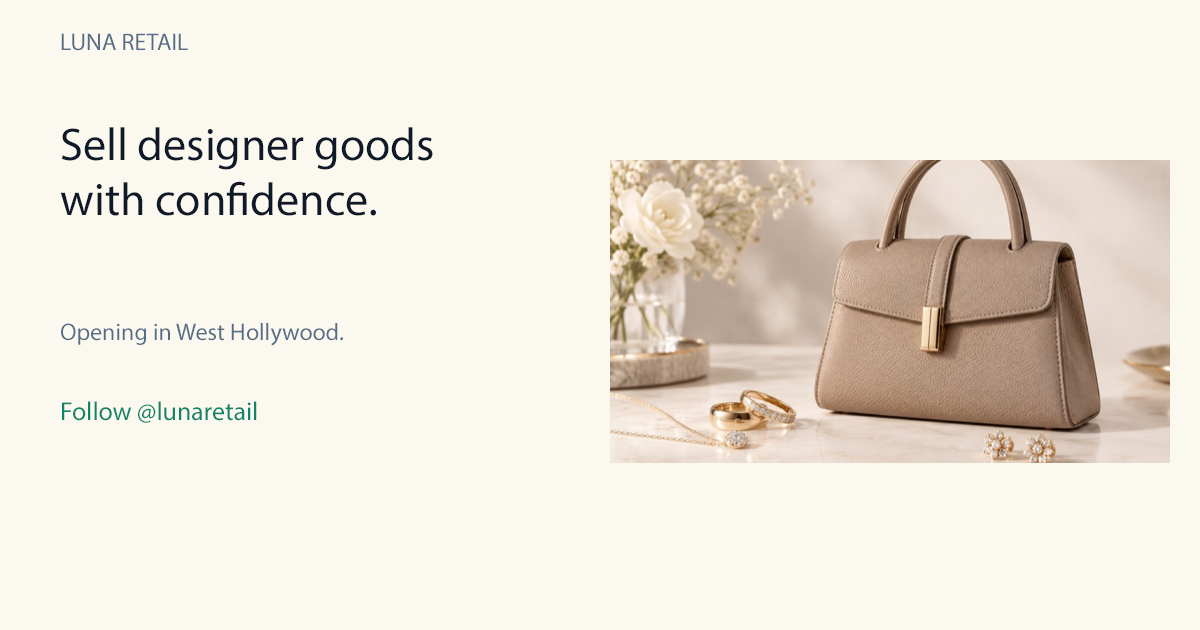
<style>
.page{position:relative;width:1200px;height:630px;background:#fbf8ef}
.page>*{position:absolute;margin:0}
.t1{font:24px "MyriadPro-Regular";color:#566d85}
.t2{font:46px "MyriadPro-Regular";color:#0f1928}
.t3{font:26px "MyriadPro-Regular";color:#0f8469}
</style>
<div class="page">
<p class="t1" style="left:61px;top:33px;width:127px;height:18px">LUNA RETAIL</p>
<p class="t2" style="left:60px;top:127px;width:373px;height:89px">Sell designer goods<br>with confidence.</p>
<p class="t1" style="left:61px;top:323px;width:282px;height:23px">Opening in West Hollywood.</p>
<p class="t3" style="left:62px;top:401px;width:195px;height:22px">Follow @lunaretail</p>
</div>
